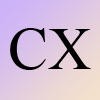
<style>
.page{position:relative;width:100px;height:100px}
.page>*{position:absolute;margin:0}
.t1{font:60px "TimesNewRomanPSMT";color:#000000}
</style>
<div class="page">
<p class="t1" style="left:10px;top:28px;width:81px;height:42px">CX</p>
</div>
